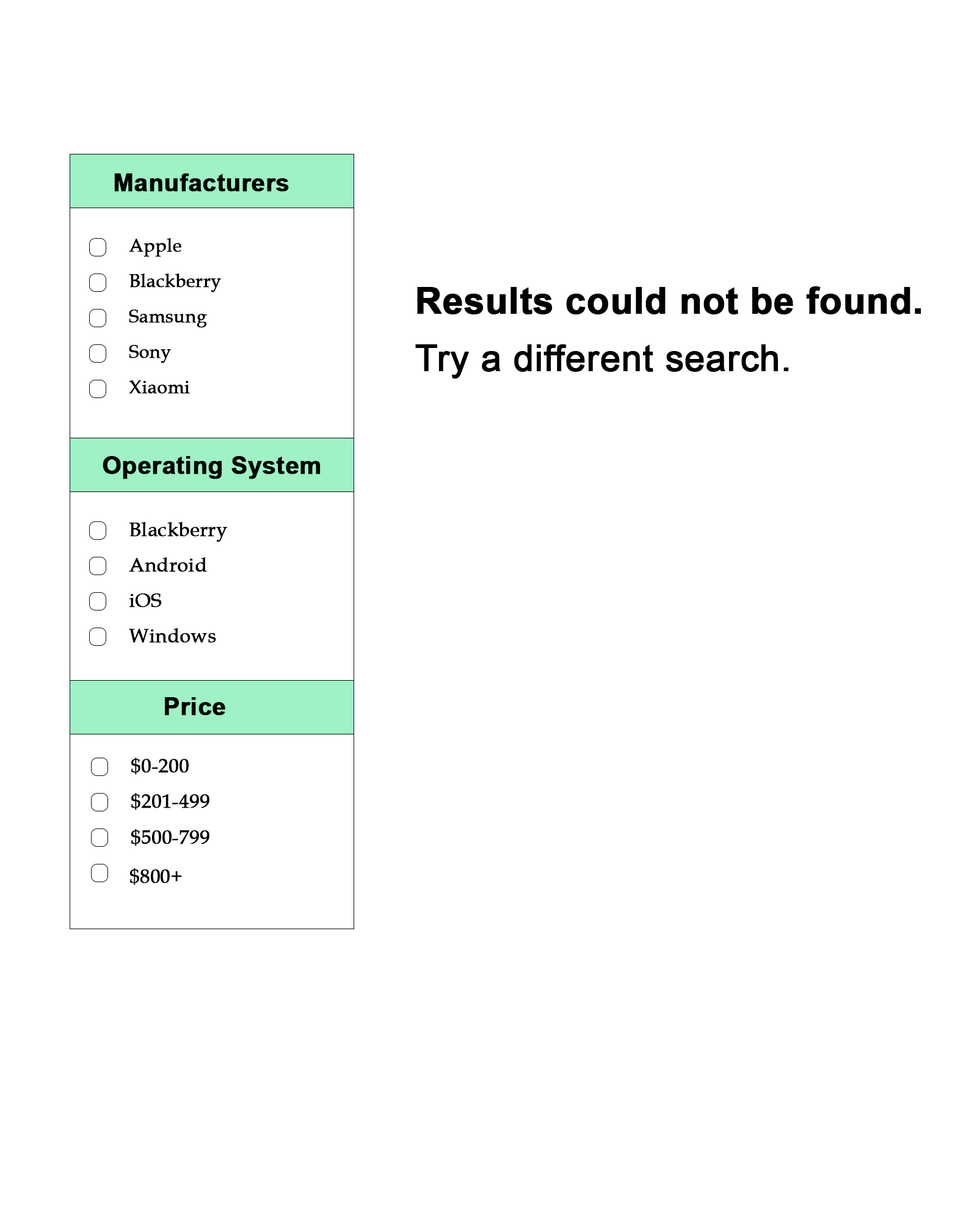
<style>
.page{position:relative;width:977px;height:1221px;background:#ffffff}
.page>*{position:absolute;margin:0}
.t1{font:24.4px "Arial-BoldMT";color:#010101;font-weight:bold}
.t2{font:18.3px "BookAntiqua";color:#000000;font-weight:bold}
.t3{font:36.6px "Arial-BoldMT";color:#000000;font-weight:bold}
.t4{font:36.6px "ArialMT";color:#000000;font-weight:bold}
.t5{font:19.5px "BookAntiqua";color:#000000;font-weight:bold}
</style>
<div class="page">
<p class="t1" style="left:114px;top:173px;width:175px;height:19px">Manufacturers</p>
<p class="t2" style="left:129px;top:238px;width:52px;height:19px">Apple</p>
<p class="t2" style="left:129px;top:273px;width:92px;height:19px">Blackberry</p>
<p class="t3" style="left:417px;top:286px;width:504px;height:28px">Results could not be found.</p>
<p class="t2" style="left:129px;top:309px;width:78px;height:19px">Samsung</p>
<p class="t2" style="left:129px;top:345px;width:42px;height:18px">Sony</p>
<p class="t4" style="left:415px;top:344px;width:374px;height:34px">Try a different search.</p>
<p class="t2" style="left:129px;top:380px;width:61px;height:14px">Xiaomi</p>
<p class="t1" style="left:103px;top:456px;width:217px;height:23px">Operating System</p>
<p class="t5" style="left:129px;top:522px;width:98px;height:20px">Blackberry</p>
<p class="t5" style="left:129px;top:557px;width:78px;height:15px">Android</p>
<p class="t5" style="left:129px;top:593px;width:33px;height:14px">iOS</p>
<p class="t5" style="left:129px;top:628px;width:87px;height:15px">Windows</p>
<p class="t1" style="left:165px;top:697px;width:60px;height:18px">Price</p>
<p class="t5" style="left:131px;top:758px;width:58px;height:17px">$0-200</p>
<p class="t5" style="left:131px;top:793px;width:78px;height:17px">$201-499</p>
<p class="t5" style="left:131px;top:829px;width:78px;height:17px">$500-799</p>
<p class="t5" style="left:129px;top:868px;width:53px;height:17px">$800+<br>+++</p>
</div>
